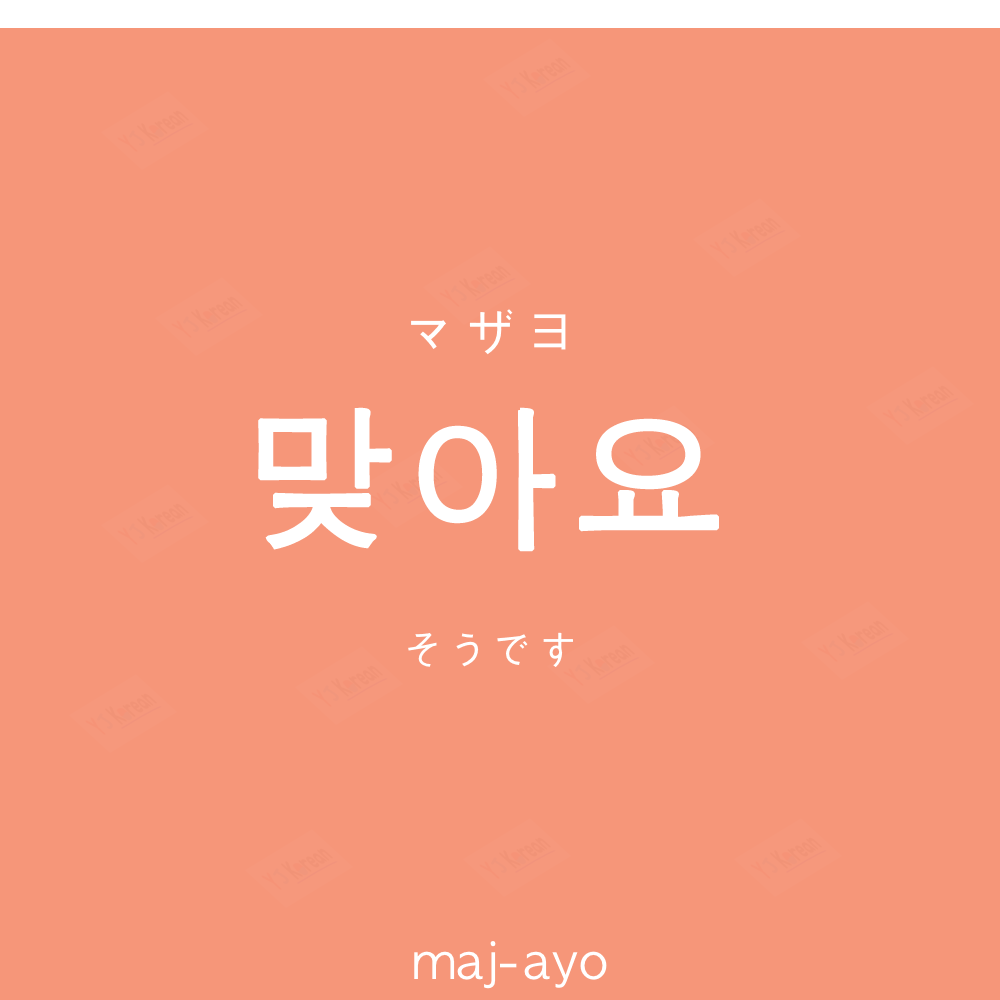
<style>
.page{position:relative;width:1000px;height:1000px;background:#f69679}
.page>*{position:absolute;margin:0}
.t1{font:60px "AppleGothic";color:#ffffff}
.t2{font:154px "AppleGothic";letter-spacing:0.04em;color:#ffffff;font-weight:bold}
.t3{font:45px "AppleGothic";color:#ffffff}
.t4{font:50px "AppleGothic";color:#ffffff}
</style>
<div class="page">
<p class="t1" style="left:411px;top:309px;width:155px;height:46px">マザヨ</p>
<p class="t2" style="left:258px;top:407px;width:461px;height:145px">맞아요</p>
<p class="t3" style="left:408px;top:632px;width:165px;height:35px">そうです</p>
<p class="t4" style="left:414px;top:941px;width:193px;height:48px">maj-ayo</p>
</div>
